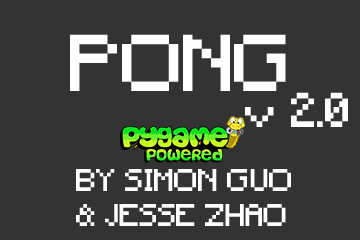
<style>
.page{position:relative;width:360px;height:240px;background:#333333}
.page>*{position:absolute;margin:0}
.t1{font:75px "Minecraft";color:#ffffff}
.t2{font:45.8px "Minecraft";color:#ffffff}
.t3{font:29.2px "Minecraft";color:#ffffff}
</style>
<div class="page">
<p class="t1" style="left:70px;top:34px;width:216px;height:57px">PONG</p>
<p class="t2" style="left:245px;top:92px;width:103px;height:35px">v 2.0</p>
<p class="t3" style="left:76px;top:169px;width:215px;height:57px">BY SIMON GUO <br>&amp; JESSE ZHAO</p>
</div>
